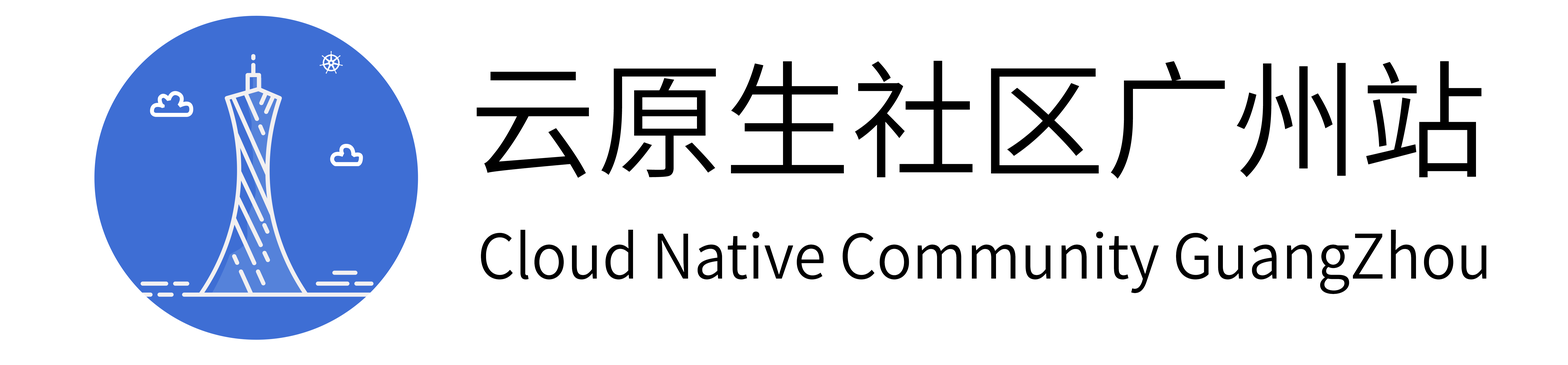
<style>
.page{position:relative;width:1568px;height:365px;background:#ffffff}
.page>*{position:absolute;margin:0}
.t1{font:127.2px "SourceHanSansCN-Normal";color:#000000}
.t2{font:61.3px "SourceHanSansSC-Normal";color:#000000;scale:0.96 1}
</style>
<div class="page">
<p class="t1" style="left:477px;top:61px;width:1005px;height:117px">云原生社区广州站</p>
<p class="t2" style="left:481px;top:229px;width:1005px;height:65px">Cloud Native Community GuangZhou</p>
</div>
